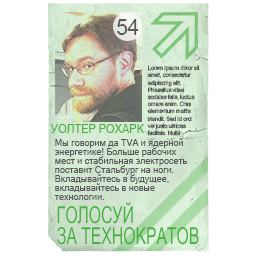
<style>
.page{position:relative;width:256px;height:256px;background:#ffffff}
.page>*{position:absolute;margin:0}
.t1{font:11px "MicrosoftSansSerif";color:#48b040;text-transform:uppercase}
.t2{font:9px/9px "MicrosoftSansSerif";color:#585858}
.t3{font:23.3px/21px "MicrosoftSansSerif";color:#48b040;scale:0.68 1}
</style>
<div class="page">
<p class="t1" style="left:50px;top:124px;width:95px;height:9px">Уолтер Рохарк</p>
<p class="t2" style="left:54px;top:138px;width:133px;height:62px">Мы говорим да TVA и ядерной энергетике! Больше рабочих мест и стабильная электросеть поставит Стальбург на ноги. Вкладывайтесь в будущее, вкладывайтесь в новые технологии.</p>
<p class="t3" style="left:57px;top:202px;width:142px;height:43px">ГОЛОСУЙ<br>ЗА ТЕХНОКРАТОВ</p>
</div>
